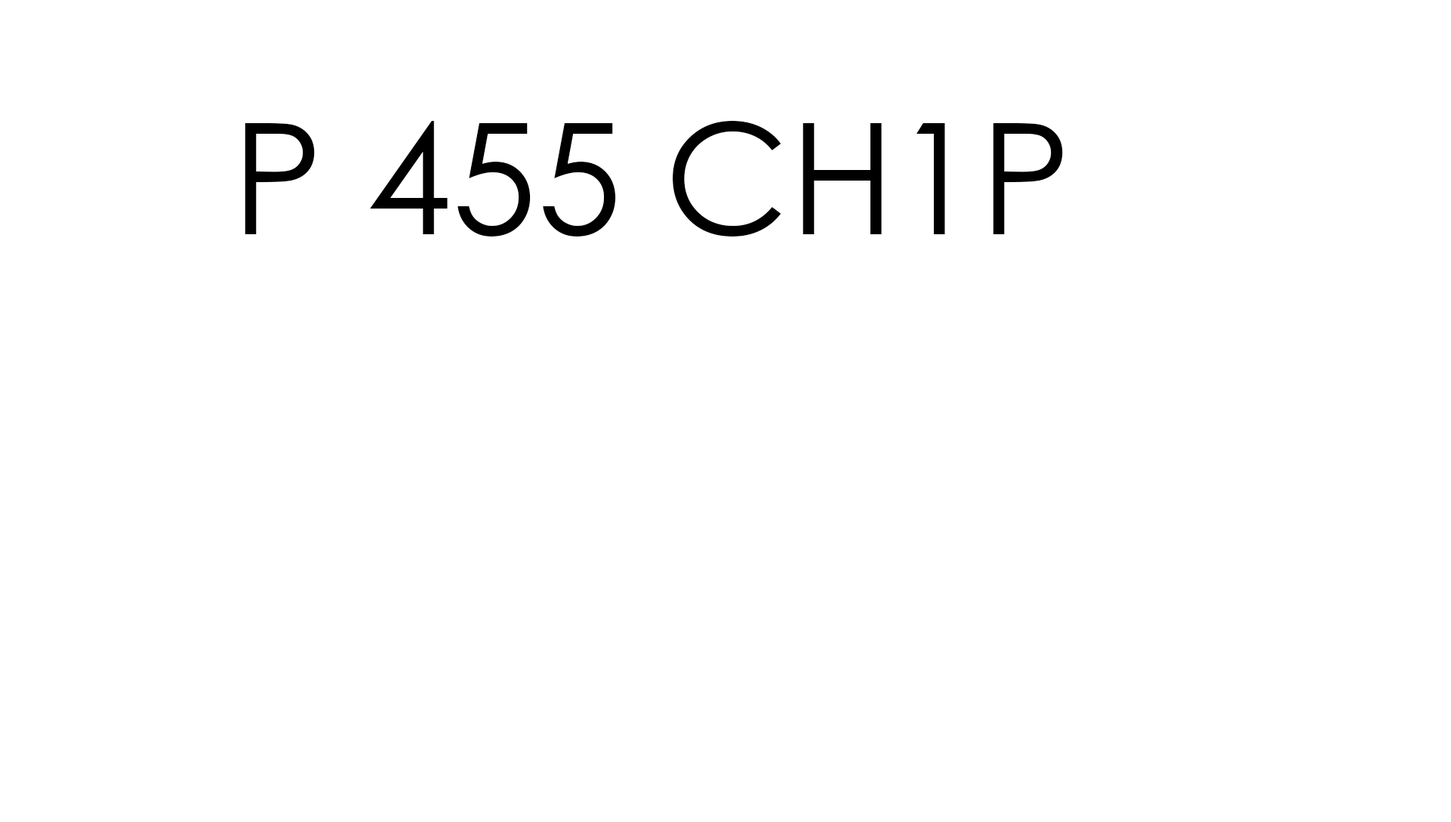
<style>
.page{position:relative;width:1451px;height:822px;background:#ffffff}
.page>*{position:absolute;margin:0}
.t1{font:154px "CenturyGothic";color:#000000}
</style>
<div class="page">
<p class="t1" style="left:245px;top:121px;width:818px;height:115px">P 455 CH1P</p>
</div>
